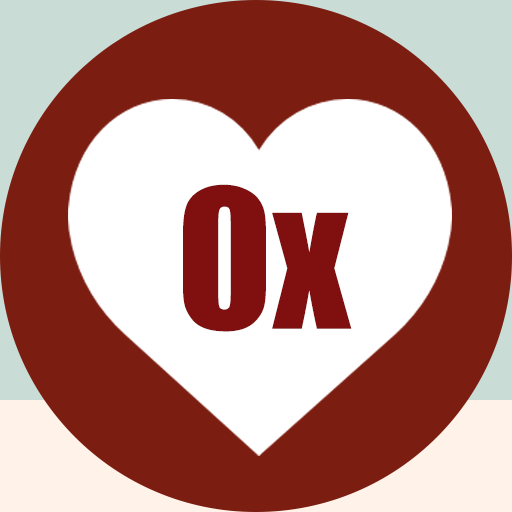
<style>
.page{position:relative;width:512px;height:512px;background:#7b1d11}
.page>*{position:absolute;margin:0}
.t1{font:178.4px "Impact";color:#801010}
</style>
<div class="page">
<p class="t1" style="left:183px;top:184px;width:169px;height:148px">0x</p>
</div>
